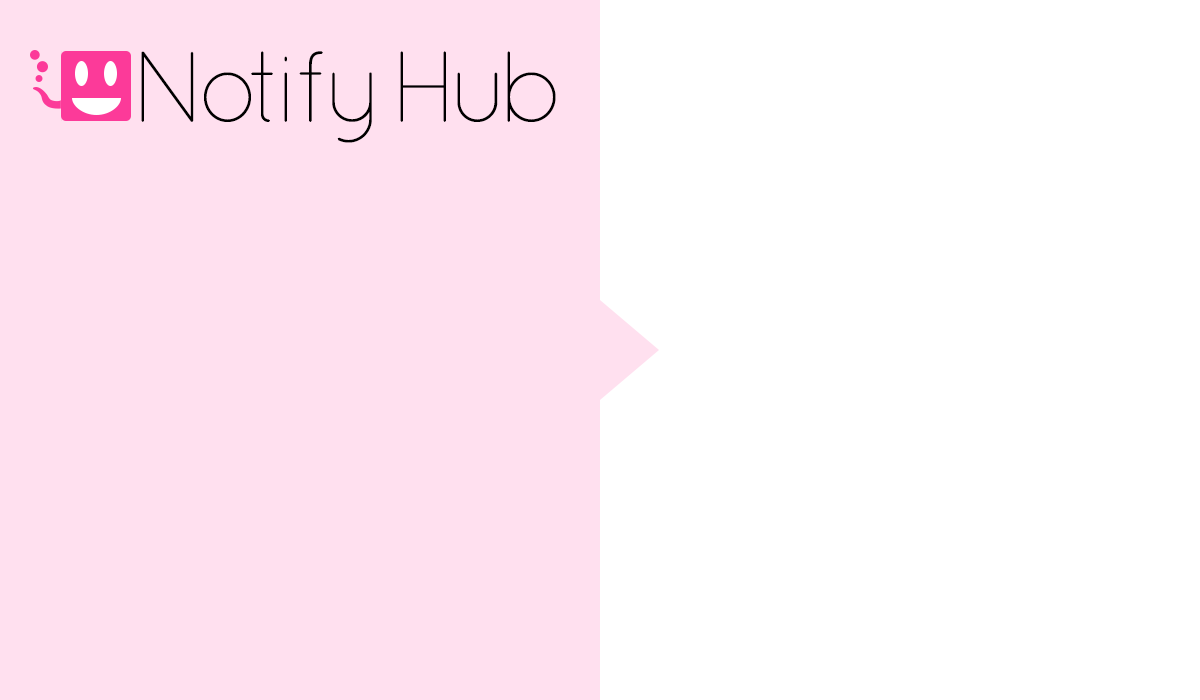
<style>
.page{position:relative;width:1200px;height:700px;background:#ffffff}
.page>*{position:absolute;margin:0}
.t1{font:100.9px "QuicksandLight-Regular";letter-spacing:-0.125em;color:#000000}
.t2{font:100.9px "QuicksandLight-Regular";letter-spacing:-0.11em;color:#000000}
.t3{font:100.9px "QuicksandLight-Regular";letter-spacing:-0.02em;color:#000000}
</style>
<div class="page">
<p class="t1" style="left:141px;top:51px;width:415px;height:92px">Not<span class="t2">i</span><span class="t3">fy </span>Hub</p>
</div>
